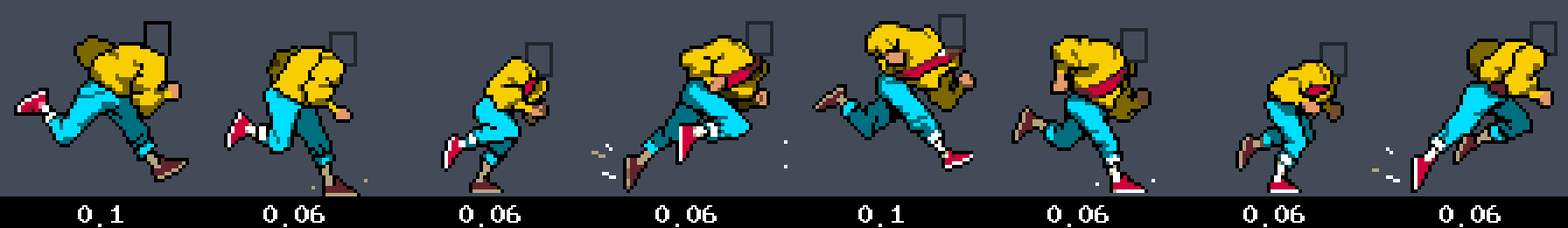
<style>
.page{position:relative;width:1568px;height:228px;background:#434b58}
.page>*{position:absolute;margin:0}
.t1{font:31.5px "DOSMyungjo";color:#ffffff}
</style>
<div class="page">
<p class="t1" style="left:78px;top:205px;width:45px;height:22px">0.1</p>
<p class="t1" style="left:263px;top:205px;width:62px;height:22px">0.06</p>
<p class="t1" style="left:459px;top:205px;width:62px;height:22px">0.06</p>
<p class="t1" style="left:655px;top:205px;width:62px;height:22px">0.06</p>
<p class="t1" style="left:858px;top:205px;width:46px;height:22px">0.1</p>
<p class="t1" style="left:1047px;top:205px;width:62px;height:22px">0.06</p>
<p class="t1" style="left:1243px;top:205px;width:62px;height:22px">0.06</p>
<p class="t1" style="left:1439px;top:205px;width:62px;height:22px">0.06</p>
</div>
